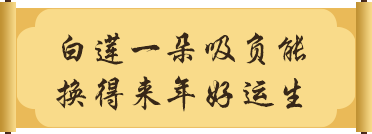
<style>
.page{position:relative;width:372px;height:134px;background:#f9db8a}
.page>*{position:absolute;margin:0}
.t1{font:36.9px/44.7px "FZXKJW--GB1-0";color:#372718;text-transform:uppercase}
</style>
<div class="page">
<p class="t1" style="left:56px;top:32px;width:250px;height:80px;text-align:center">白莲一朵吸负能<br>换得来年好运生</p>
</div>
